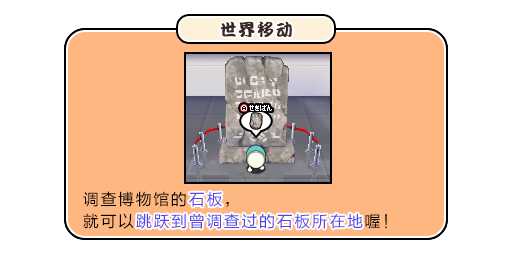
<style>
.page{position:relative;width:512px;height:256px;background:#ffffff}
.page>*{position:absolute;margin:0}
.t1{font:17px "DFPKanTingLiuW9";letter-spacing:0.1em;color:#3b2626}
.t2{font:16px/22px "FZLTHJW--GB1-0";letter-spacing:0.1em;color:#5444ed}
.t3{font:16px/22px "FZLTHJW--GB1-0";letter-spacing:0.1em;color:#000000}
.t4{font:16px "FZLTHJW--GB1-0";letter-spacing:0.1em;color:#5444ed}
</style>
<div class="page">
<p class="t1" style="left:220px;top:21px;width:72px;height:17px">世界移动</p>
<p class="t2" style="left:83px;top:191px;width:304px;height:38px"><span class="t3">调查博物馆的</span>石板<span class="t3">，<br>就可以</span>跳跃到曾调查过的石板所在地<span class="t3">喔！</span></p>
<p class="t4" style="left:189px;top:191px;width:33px;height:16px">石板</p>
<p class="t4" style="left:136px;top:213px;width:227px;height:16px">跳跃到曾调查过的石板所在地</p>
</div>
